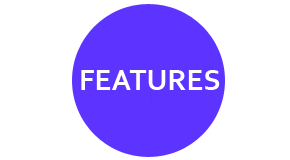
<style>
.page{position:relative;width:290px;height:160px;background:#ffffff}
.page>*{position:absolute;margin:0}
.t1{font:30px "Corbel-Bold";color:#ffffff}
</style>
<div class="page">
<p class="t1" style="left:81px;top:70px;width:139px;height:20px">FEATURES</p>
</div>
